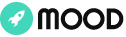
<style>
.page{position:relative;width:126px;height:37px;background:#ffffff}
.page>*{position:absolute;margin:0}
.t1{font:29.8px "Righteous-Regular";letter-spacing:-0.025em;color:#0f0f0f}
</style>
<div class="page">
<p class="t1" style="left:38px;top:8px;width:86px;height:22px">MOOD</p>
</div>
